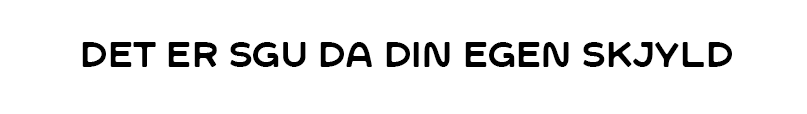
<style>
.page{position:relative;width:807px;height:114px;background:#ffffff}
.page>*{position:absolute;margin:0}
.t1{font:35.4px "SFCWosterSans-Regular";color:#000000}
</style>
<div class="page">
<p class="t1" style="left:82px;top:42px;width:650px;height:25px">Det er sgu da din egen skjyld</p>
</div>
